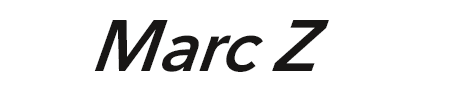
<style>
.page{position:relative;width:450px;height:100px;background:#ffffff}
.page>*{position:absolute;margin:0}
.t1{font:72px "AvenirNext-DemiBoldItalic";color:#181615;font-style:italic}
</style>
<div class="page">
<p class="t1" style="left:94px;top:20px;width:235px;height:52px">Marc Z</p>
</div>
